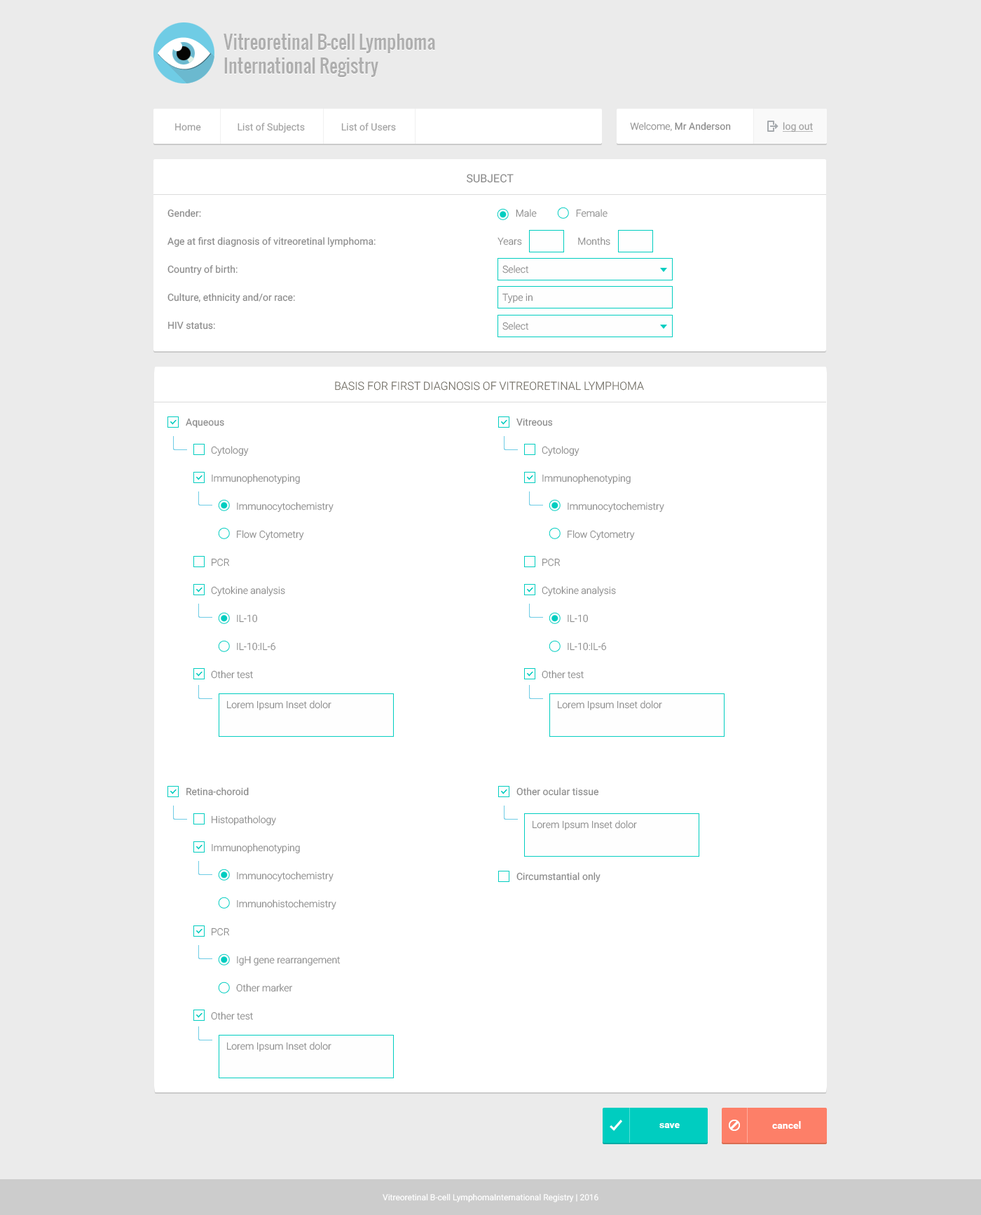
<style>
.page{position:relative;width:981px;height:1215px;background:#ffffff}
.page>*{position:absolute;margin:0}
.t1{font:18.2px/23.8px "Oswald-Regular";color:#aeaeae}
.t2{font:9.8px "Roboto-Regular";color:#a0a0a0}
.t3{font:9.8px "Roboto-Regular";color:#888888}
.t4{font:9.8px "Roboto-Light";color:#888888}
.t5{font:9.8px "Roboto-Regular";color:#a0a0a0;text-decoration:underline}
.t6{font:11.2px "Roboto-Regular";color:#888888;text-transform:uppercase}
.t7{font:9.8px/28px "Roboto-Regular";color:#888888}
.t8{font:11.2px "Roboto-Light";color:#69655a;text-transform:uppercase}
.t9{font:9.8px/28px "Roboto-Light";color:#888888}
.t10{font:9.8px "Roboto-Bold";color:#ffffff}
.t11{font:8.4px "Roboto-Regular";color:#ffffff}
</style>
<div class="page">
<p class="t1" style="left:224px;top:34px;width:211px;height:44px">Vitreoretinal B-cell Lymphoma<br>International Registry</p>
<p class="t1" style="left:224px;top:34px;width:211px;height:43px">Vitreoretinal B-cell Lymphoma<br>International Registry</p>
<p class="t2" style="left:175px;top:123px;width:221px;height:10px">Home               List of Subjects               List of Users</p>
<p class="t3" style="left:630px;top:122px;width:101px;height:9px"><span class="t4">Welcome, </span>Mr Anderson</p>
<p class="t5" style="left:783px;top:122px;width:30px;height:10px">log out</p>
<p class="t6" style="left:467px;top:174px;width:47px;height:9px">Subject</p>
<p class="t7" style="left:168px;top:209px;width:208px;height:120px">Gender:<br>Age at first diagnosis of vitreoretinal lymphoma:<br>Country of birth:<br>Culture, ethnicity and/or race:<br>HIV status:</p>
<p class="t4" style="left:516px;top:209px;width:21px;height:8px">Male</p>
<p class="t4" style="left:576px;top:209px;width:32px;height:8px">Female</p>
<p class="t4" style="left:498px;top:237px;width:24px;height:8px">Years</p>
<p class="t4" style="left:578px;top:237px;width:33px;height:8px">Months</p>
<p class="t4" style="left:503px;top:265px;width:26px;height:8px">Select</p>
<p class="t4" style="left:503px;top:293px;width:30px;height:11px">Type in</p>
<p class="t4" style="left:503px;top:322px;width:26px;height:8px">Select</p>
<p class="t8" style="left:335px;top:381px;width:309px;height:9px">Basis for First Diagnosis of Vitreoretinal Lymphoma</p>
<p class="t9" style="left:186px;top:418px;width:148px;height:261px"><span class="t7">Aqueous<br> </span>Cytology  <br> Immunophenotyping  <br>  Immunocytochemistry<br>  Flow Cytometry<br> PCR  <br> Cytokine analysis  <br>  IL-10<br>  IL-10:IL-6<br> Other test</p>
<p class="t9" style="left:517px;top:418px;width:148px;height:261px"><span class="t7">Vitreous<br> </span>Cytology  <br> Immunophenotyping  <br>  Immunocytochemistry<br>  Flow Cytometry<br> PCR  <br> Cytokine analysis  <br>  IL-10<br>  IL-10:IL-6<br> Other test</p>
<p class="t4" style="left:227px;top:700px;width:105px;height:10px">Lorem Ipsum Inset dolor</p>
<p class="t4" style="left:558px;top:700px;width:104px;height:10px">Lorem Ipsum Inset dolor</p>
<p class="t9" style="left:186px;top:787px;width:155px;height:233px"><span class="t7">Retina-choroid<br> </span>Histopathology <br> Immunophenotyping  <br>  Immunocytochemistry<br>  Immunohistochemistry<br> PCR<br>  IgH gene rearrangement<br>  Other marker<br> Other test</p>
<p class="t3" style="left:517px;top:787px;width:82px;height:9px">Other ocular tissue</p>
<p class="t4" style="left:533px;top:820px;width:104px;height:10px">Lorem Ipsum Inset dolor</p>
<p class="t3" style="left:517px;top:872px;width:84px;height:11px">Circumstantial only</p>
<p class="t4" style="left:227px;top:1042px;width:105px;height:10px">Lorem Ipsum Inset dolor</p>
<p class="t10" style="left:773px;top:1121px;width:28px;height:8px">cancel</p>
<p class="t10" style="left:660px;top:1123px;width:20px;height:5px">save</p>
<p class="t11" style="left:383px;top:1193px;width:216px;height:9px">Vitreoretinal B-cell LymphomaInternational Registry | 2016</p>
</div>
